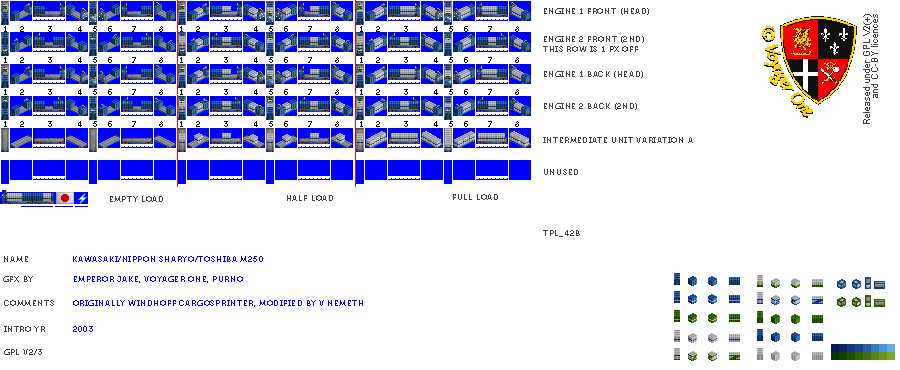
<style>
.page{position:relative;width:900px;height:370px;background:#ffffff}
.page>*{position:absolute;margin:0}
.t1{font:8px "Museo700-Regular";letter-spacing:0.075em;color:#404040;text-transform:uppercase}
.t2{font:8px "Museo700-Regular";color:#000000}
.t3{font:8px "Museo700-Regular";letter-spacing:0.075em;color:#0000ff;text-transform:uppercase}
</style>
<div class="page">
<p class="t1" style="left:544px;top:8px;width:105px;height:7px">ENGINE 1 FRONT (HEAD)</p>
<p class="t2" style="left:4px;top:26px;width:159px;height:6px">1      2           3            4     5     6         7           8</p>
<p class="t2" style="left:180px;top:26px;width:159px;height:6px">1      2           3            4     5     6         7           8</p>
<p class="t2" style="left:360px;top:26px;width:159px;height:6px">1      2           3            4     5     6         7           8</p>
<p class="t1" style="left:543px;top:36px;width:101px;height:16px">ENGINE 2 FRONT (2ND)<br>this row is 1 px off</p>
<p class="t2" style="left:4px;top:57px;width:159px;height:6px">1      2           3            4     5     6         7           8</p>
<p class="t2" style="left:180px;top:57px;width:159px;height:6px">1      2           3            4     5     6         7           8</p>
<p class="t2" style="left:360px;top:57px;width:159px;height:6px">1      2           3            4     5     6         7           8</p>
<p class="t1" style="left:544px;top:71px;width:99px;height:7px">ENGINE 1 BACK (HEAD)</p>
<p class="t2" style="left:4px;top:89px;width:159px;height:6px">1      2           3            4     5     6         7           8</p>
<p class="t2" style="left:180px;top:89px;width:159px;height:6px">1      2           3            4     5     6         7           8</p>
<p class="t2" style="left:360px;top:89px;width:159px;height:6px">1      2           3            4     5     6         7           8</p>
<p class="t1" style="left:544px;top:103px;width:93px;height:7px">ENGINE 2 BACK (2ND)</p>
<p class="t2" style="left:4px;top:121px;width:159px;height:6px">1      2           3            4     5     6         7           8</p>
<p class="t2" style="left:180px;top:121px;width:159px;height:6px">1      2           3            4     5     6         7           8</p>
<p class="t2" style="left:360px;top:121px;width:159px;height:6px">1      2           3            4     5     6         7           8</p>
<p class="t1" style="left:543px;top:137px;width:150px;height:6px">INTERMEDIATE UNIT VARIATION A</p>
<p class="t1" style="left:544px;top:169px;width:34px;height:6px">unused</p>
<p class="t1" style="left:110px;top:196px;width:53px;height:6px">EMPTY LOAD</p>
<p class="t1" style="left:287px;top:195px;width:46px;height:6px">HALF LOAD</p>
<p class="t1" style="left:453px;top:194px;width:45px;height:6px">FULL LOAD</p>
<p class="t1" style="left:543px;top:230px;width:37px;height:7px">tpl_42b</p>
<p class="t1" style="left:4px;top:256px;width:24px;height:6px">name</p>
<p class="t3" style="left:73px;top:256px;width:190px;height:6px">Kawasaki/Nippon Sharyo/Toshiba M250</p>
<p class="t1" style="left:3px;top:276px;width:30px;height:6px">gfx by</p>
<p class="t3" style="left:74px;top:276px;width:169px;height:7px">emperor jake, voyager one, purno</p>
<p class="t1" style="left:4px;top:300px;width:50px;height:6px">comments</p>
<p class="t3" style="left:73px;top:300px;width:290px;height:7px">originally windhoff cargosprinter, modified by v nemeth</p>
<p class="t1" style="left:4px;top:326px;width:41px;height:6px">intro yr</p>
<p class="t3" style="left:73px;top:326px;width:20px;height:6px">2003</p>
<p class="t1" style="left:4px;top:349px;width:38px;height:6px">gpl v2/3</p>
</div>
